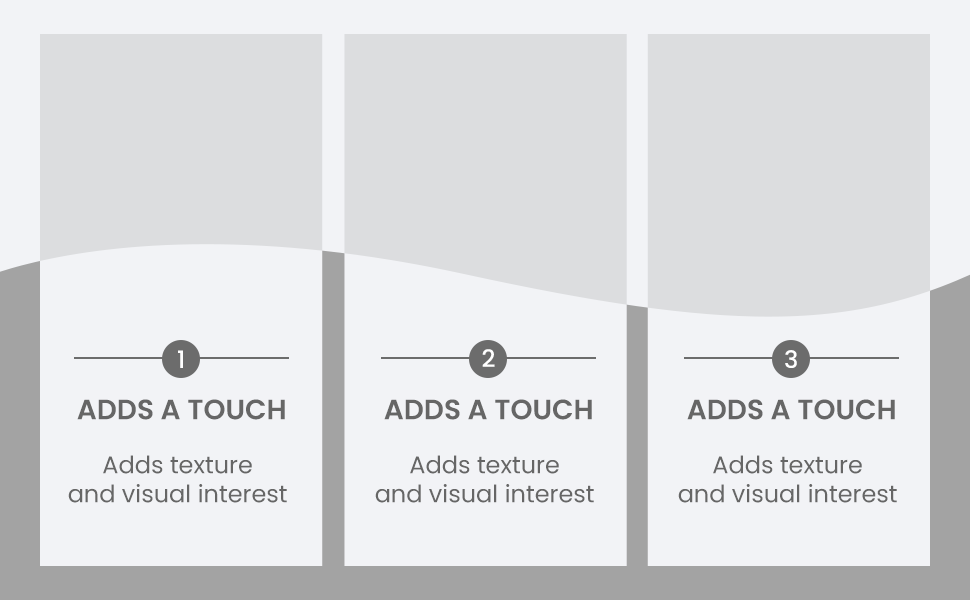
<style>
.page{position:relative;width:970px;height:600px;background:#f2f3f6}
.page>*{position:absolute;margin:0}
.t1{font:24px "Poppins-Medium";color:#ffffff}
.t2{font:28px "Poppins-SemiBold";color:#666666;text-transform:uppercase}
.t3{font:24px "Poppins-Regular";color:#666666}
</style>
<div class="page">
<p class="t1" style="left:178px;top:350px;width:5px;height:18px">1</p>
<p class="t1" style="left:482px;top:349px;width:13px;height:18px">2</p>
<p class="t1" style="left:785px;top:350px;width:12px;height:18px">3</p>
<p class="t2" style="left:77px;top:399px;width:208px;height:21px">Adds a touch</p>
<p class="t2" style="left:384px;top:399px;width:208px;height:21px">Adds a touch</p>
<p class="t2" style="left:687px;top:399px;width:208px;height:21px">Adds a touch</p>
<p class="t3" style="left:68px;top:455px;width:219px;height:48px;text-align:center">Adds texture<br>and visual interest</p>
<p class="t3" style="left:375px;top:455px;width:219px;height:48px;text-align:center">Adds texture<br>and visual interest</p>
<p class="t3" style="left:678px;top:455px;width:219px;height:48px;text-align:center">Adds texture<br>and visual interest</p>
</div>
